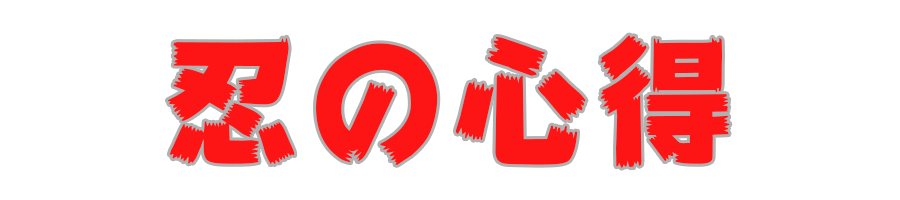
<style>
.page{position:relative;width:900px;height:200px;background:#ffffff}
.page>*{position:absolute;margin:0}
.t1{font:141.2px "RoBrushStd-UB";letter-spacing:0.02em;color:#fd1414}
</style>
<div class="page">
<p class="t1" style="left:167px;top:35px;width:563px;height:133px">忍の心得</p>
</div>
